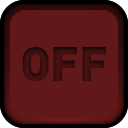
<style>
.page{position:relative;width:128px;height:128px;background:#611818}
.page>*{position:absolute;margin:0}
.t1{font:48px "DIN-Black";color:#461111}
</style>
<div class="page">
<p class="t1" style="left:22px;top:47px;width:84px;height:34px">OFF</p>
</div>
